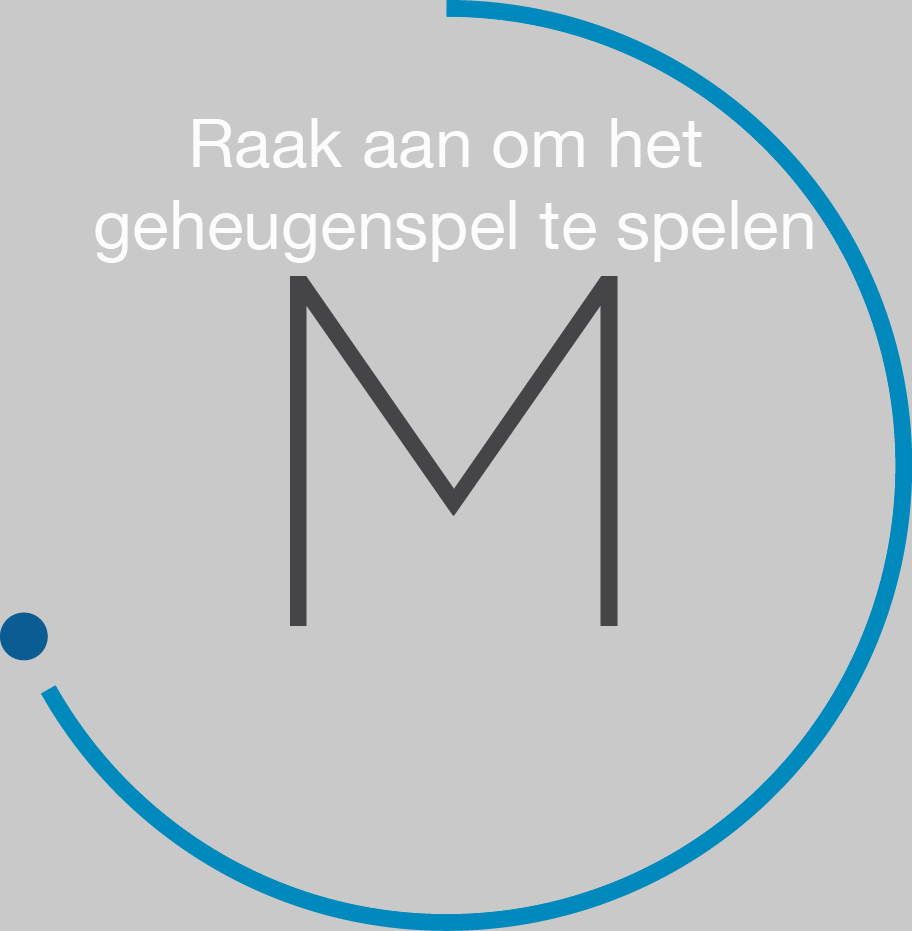
<style>
.page{position:relative;width:912px;height:931px;background:#c9c9c9}
.page>*{position:absolute;margin:0}
.t1{font:68px "HelveticaNeue";color:#fcfcfc}
</style>
<div class="page">
<p class="t1" style="left:95px;top:118px;width:718px;height:145px;text-align:center">Raak aan om het <br>geheugenspel te spelen</p>
</div>
